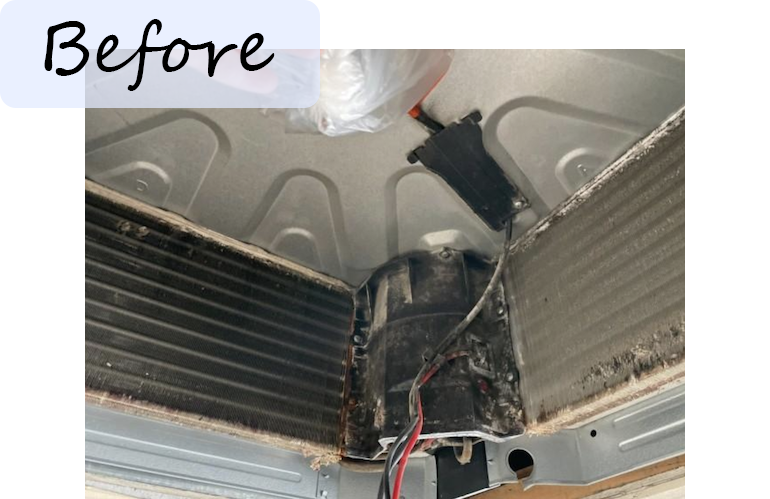
<style>
.page{position:relative;width:770px;height:499px;background:#ffffff}
.page>*{position:absolute;margin:0}
.t1{font:72px "SegoeScript";color:#000000}
</style>
<div class="page">
<p class="t1" style="left:44px;top:19px;width:231px;height:72px">Before</p>
</div>
